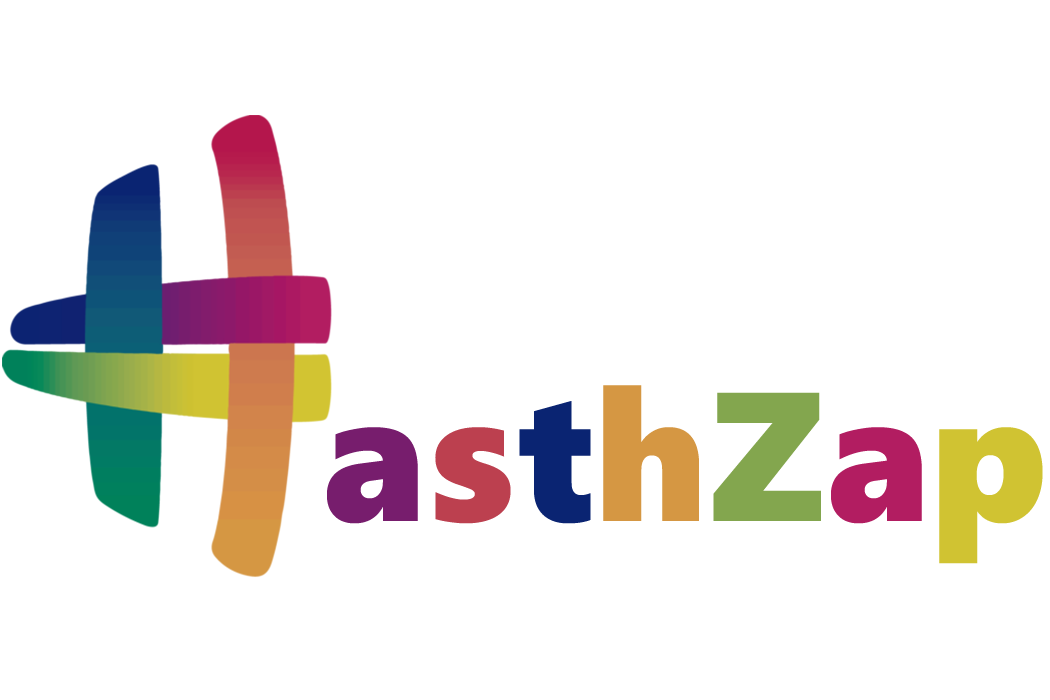
<style>
.page{position:relative;width:1050px;height:700px;background:#ffffff}
.page>*{position:absolute;margin:0}
.t1{font:183.3px "SegoeUIBlack";letter-spacing:0.005em;color:#771d6d}
.t2{font:183.3px "SegoeUIBlack";letter-spacing:0.005em;color:#bc404f}
.t3{font:183.3px "SegoeUIBlack";letter-spacing:0.005em;color:#0a2472}
.t4{font:183.3px "SegoeUIBlack";letter-spacing:0.005em;color:#d59743}
.t5{font:183.3px "SegoeUIBlack";letter-spacing:0.005em;color:#83a64e}
.t6{font:183.3px "SegoeUIBlack";letter-spacing:0.005em;color:#b21d61}
.t7{font:183.3px "SegoeUIBlack";letter-spacing:0.005em;color:#d0c332}
</style>
<div class="page">
<p class="t1" style="left:327px;top:385px;width:716px;height:179px">a<span class="t2">s</span><span class="t3">t</span><span class="t4">h</span><span class="t5">Z</span><span class="t6">a</span><span class="t7">p</span></p>
</div>
